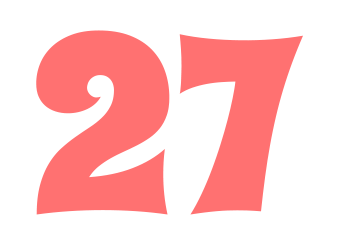
<style>
.page{position:relative;width:354px;height:236px;background:#ffffff}
.page>*{position:absolute;margin:0}
.t1{font:250px "SpicyRice-Regular";color:#ff7171}
</style>
<div class="page">
<p class="t1" style="left:36px;top:30px;width:267px;height:185px">27</p>
</div>
